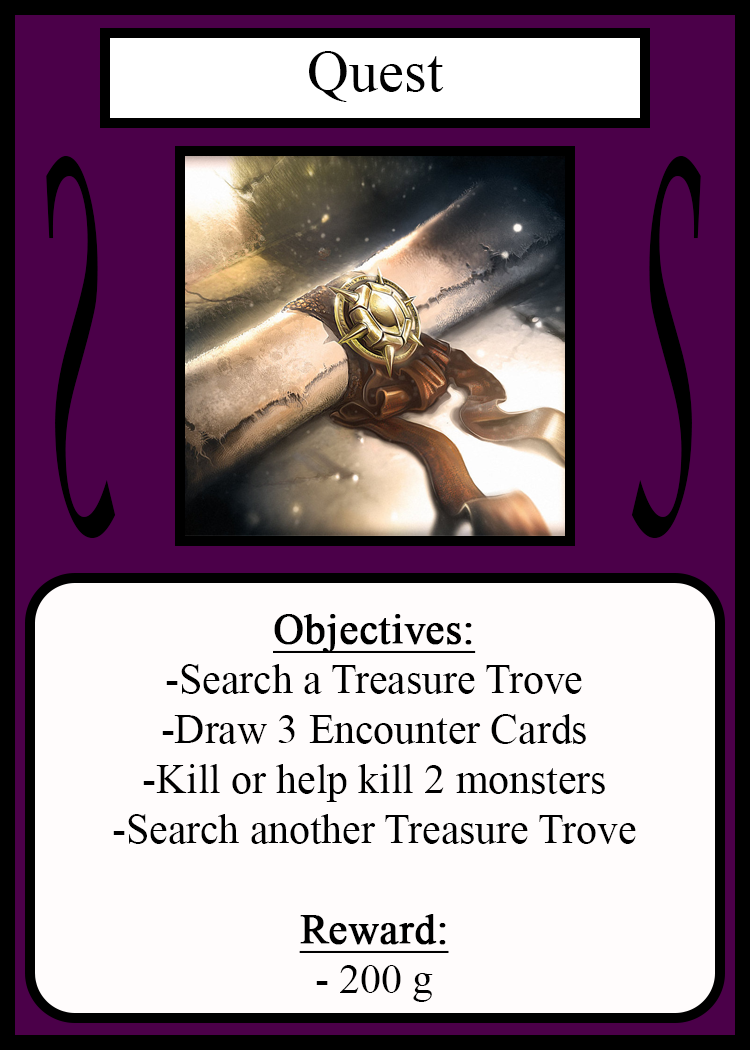
<style>
.page{position:relative;width:750px;height:1050px;background:#fffcfc}
.page>*{position:absolute;margin:0}
.t1{font:58.3px "TimesNewRomanPSMT";color:#010101}
.t2{font:504.3px "LucidaCalligraphy-Italic";color:#000000;scale:0.24 1}
.t3{font:504.1px "LucidaCalligraphy-Italic";color:#000000;scale:0.24 1}
.t4{font:41.7px "TimesNewRomanPSMT";color:#000000}
.t5{font:41.7px "TimesNewRomanPSMT";color:#000000;font-weight:bold;text-decoration:underline}
</style>
<div class="page">
<p class="t1" style="left:309px;top:51px;width:135px;height:51px">Quest</p>
<p class="t2" style="left:46px;top:156px;width:70px;height:382px;rotate:180deg">S</p>
<p class="t3" style="left:631px;top:156px;width:70px;height:382px">S</p>
<p class="t4" style="left:113px;top:614px;width:523px;height:388px;text-align:center"><span class="t5">Objectives:<br></span>-Search a Treasure Trove<br>-Draw 3 Encounter Cards<br>-Kill or help kill 2 monsters<br>-Search another Treasure Trove<br><br><span class="t5">Reward:</span><br>- 200 g</p>
</div>
